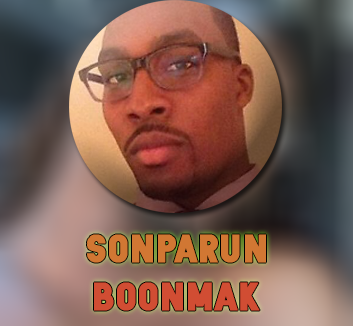
<style>
.page{position:relative;width:353px;height:326px}
.page>*{position:absolute;margin:0}
.t1{font:40px "ZilapSleep-Grunge";color:#d17733;font-weight:bold}
.t2{font:40px "ZilapSleep-Grunge";color:#d14d33;font-weight:bold}
</style>
<div class="page">
<p class="t1" style="left:87px;top:234px;width:179px;height:77px;text-align:center">Sonparun<br><span class="t2">Boonmak</span></p>
</div>
